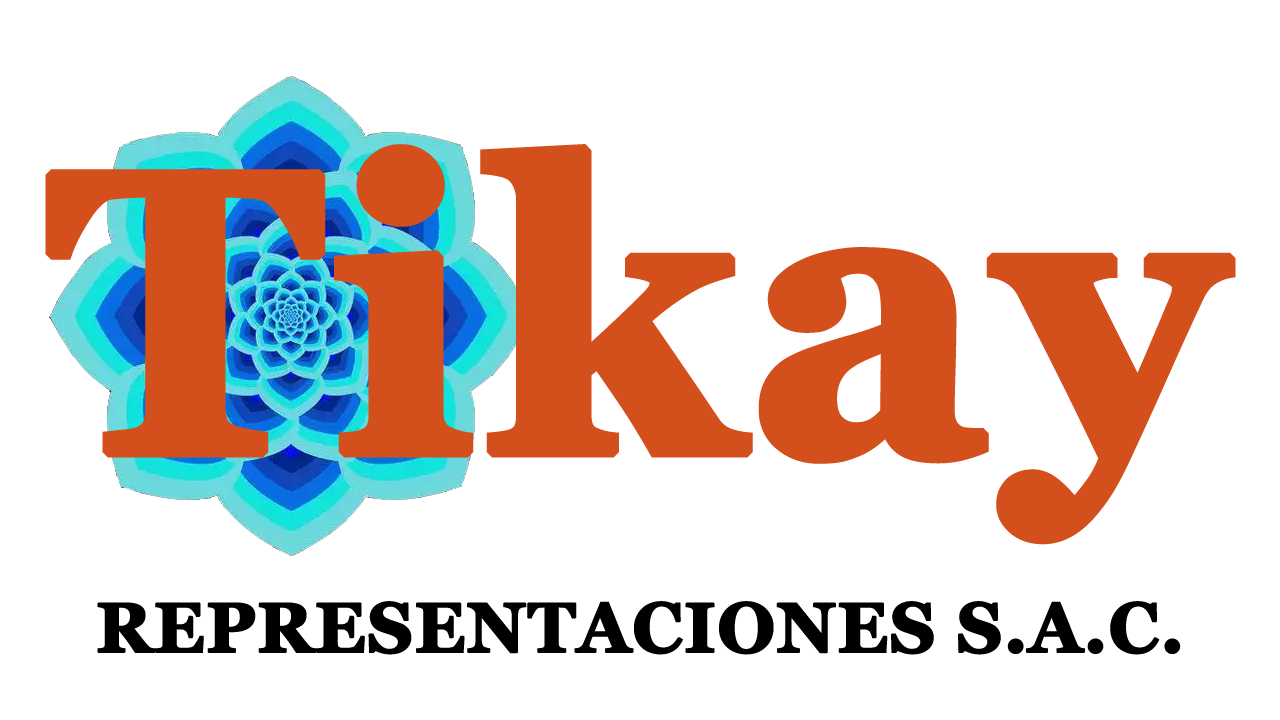
<style>
.page{position:relative;width:1280px;height:720px;background:#ffffff}
.page>*{position:absolute;margin:0}
.t1{font:400px "Georgia-Bold";color:#d3501c;font-weight:bold}
.t2{font:70px "Georgia-Bold";color:#000000;font-weight:bold}
</style>
<div class="page">
<p class="t1" style="left:45px;top:144px;width:1191px;height:401px">Tikay</p>
<p class="t2" style="left:97px;top:601px;width:1084px;height:54px">REPRESENTACIONES S.A.C.</p>
</div>
